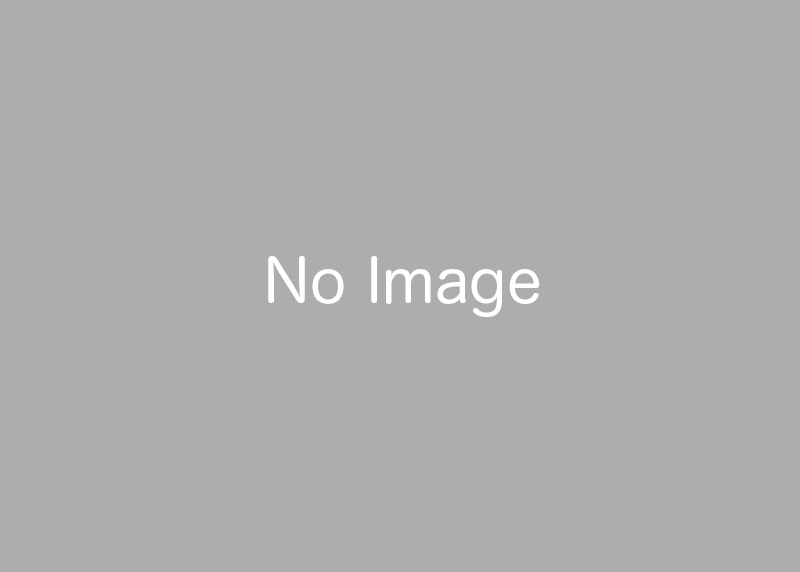
<style>
.page{position:relative;width:800px;height:572px;background:#adadad}
.page>*{position:absolute;margin:0}
.t1{font:60px "HiraMaruPro-W4";color:#ffffff}
</style>
<div class="page">
<p class="t1" style="left:268px;top:256px;width:272px;height:61px">No Image</p>
</div>
